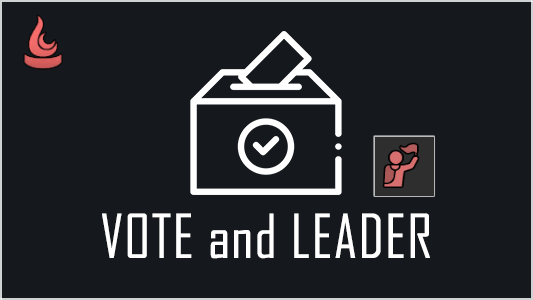
<style>
.page{position:relative;width:533px;height:300px;background:#15191d}
.page>*{position:absolute;margin:0}
.t1{font:57.7px "AgencyFB-Reg";color:#ffffff;font-weight:bold}
</style>
<div class="page">
<p class="t1" style="left:102px;top:213px;width:328px;height:46px">VOTE and LEADER</p>
</div>
